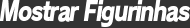
<style>
.page{position:relative;width:190px;height:28px;background:#333333}
.page>*{position:absolute;margin:0}
.t1{font:26.7px "RodinPro-EB";letter-spacing:-0.067em;color:#ffffff;font-style:italic;scale:0.8 1}
</style>
<div class="page">
<p class="t1" style="left:0px;top:0px;width:191px;height:27px">Mostrar Figurinhas</p>
</div>
